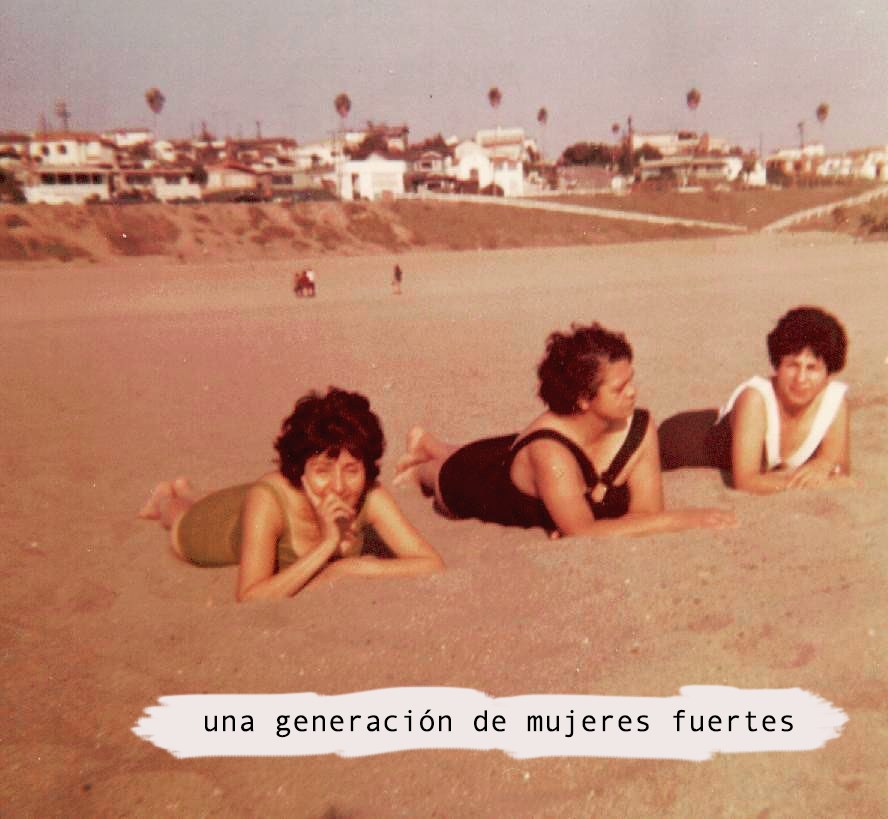
<style>
.page{position:relative;width:888px;height:819px}
.page>*{position:absolute;margin:0}
.t1{font:30px "AndaleMono";color:#000000}
</style>
<div class="page">
<p class="t1" style="left:205px;top:709px;width:588px;height:29px">una generación de mujeres fuertes</p>
</div>
